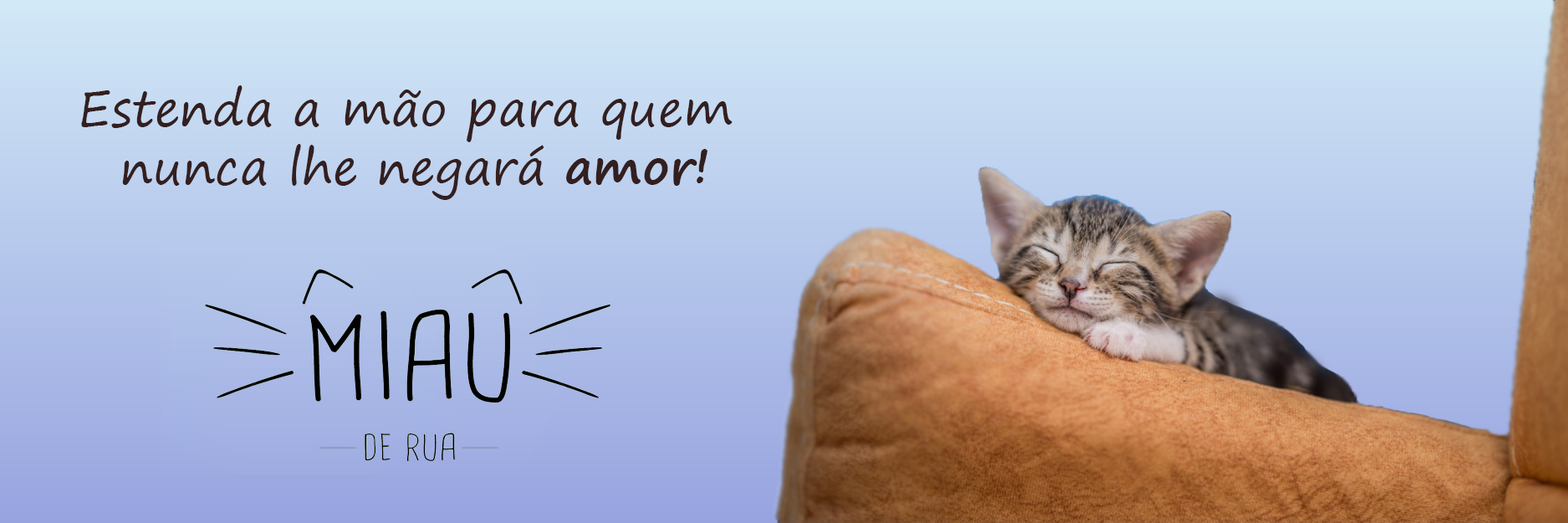
<style>
.page{position:relative;width:1568px;height:523px}
.page>*{position:absolute;margin:0}
.t1{font:48.8px "SegoePrint";color:#331f1f}
.t2{font:48.8px "SegoePrint-Bold";color:#331f1f}
</style>
<div class="page">
<p class="t1" style="left:81px;top:85px;width:652px;height:115px;text-align:center">Estenda a mão para quem<br> nunca lhe negará <span class="t2">amor!</span></p>
</div>
